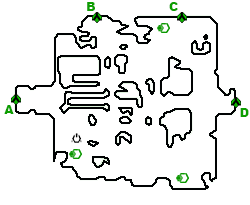
<style>
.page{position:relative;width:250px;height:205px;background:#ffffff}
.page>*{position:absolute;margin:0}
.t1{font:12px "Arial-Black";color:#0d9e01}
</style>
<div class="page">
<p class="t1" style="left:87px;top:2px;width:8px;height:9px">B</p>
<p class="t1" style="left:169px;top:2px;width:9px;height:9px">C</p>
<p class="t1" style="left:4px;top:105px;width:10px;height:9px">A</p>
<p class="t1" style="left:240px;top:108px;width:9px;height:9px">D</p>
</div>
